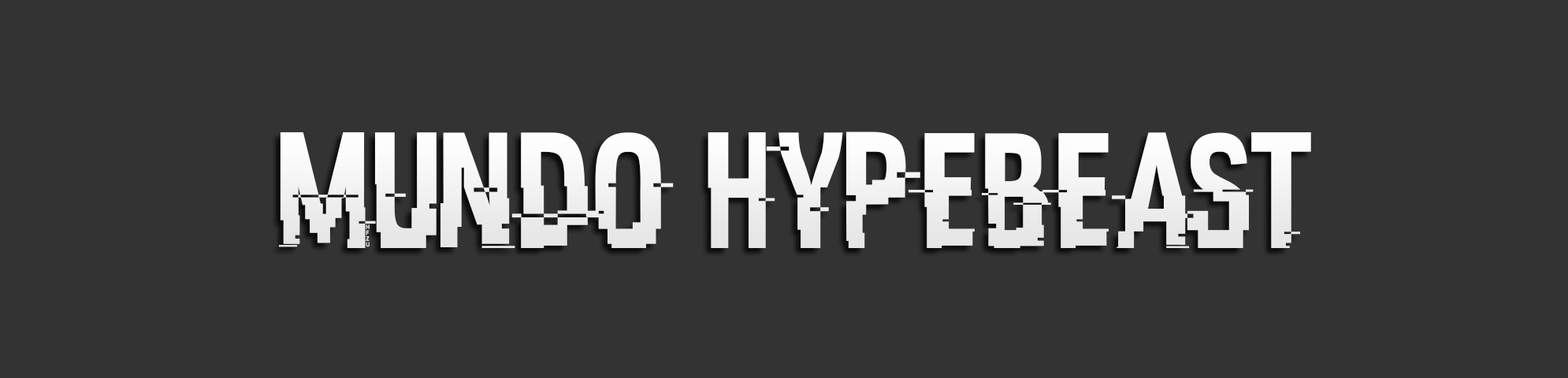
<style>
.page{position:relative;width:1568px;height:378px;background:#333333}
.page>*{position:absolute;margin:0}
.t1{font:165.8px "HACKED";color:#ffffff;scale:0.87 1}
</style>
<div class="page">
<p class="t1" style="left:279px;top:132px;width:1032px;height:116px">Mundo Hypebeast</p>
</div>
